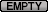
<style>
.page{position:relative;width:48px;height:12px;background:#000000}
.page>*{position:absolute;margin:0}
.t1{font:12px "CoolveticaRg-Regular";color:#000000}
</style>
<div class="page">
<p class="t1" style="left:7px;top:2px;width:35px;height:8px">EMPTY</p>
</div>
